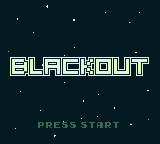
<style>
.page{position:relative;width:160px;height:144px;background:#031922}
.page>*{position:absolute;margin:0}
.t1{font:24px "5x5-Pixel";letter-spacing:0.005em;color:#e0f8d0}
.t2{font:8px "Early-GameBoy";color:#327156}
</style>
<div class="page">
<p class="t1" style="left:12px;top:59px;width:135px;height:15px">BLACKOUT</p>
<p class="t2" style="left:38px;top:122px;width:81px;height:6px">Press START</p>
</div>
